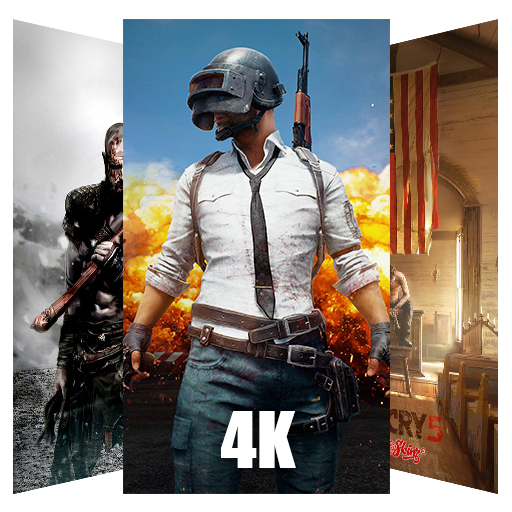
<style>
.page{position:relative;width:512px;height:512px}
.page>*{position:absolute;margin:0}
.t1{font:72px "Impact";color:#ffffff}
</style>
<div class="page">
<p class="t1" style="left:221px;top:411px;width:75px;height:57px">4K</p>
</div>
